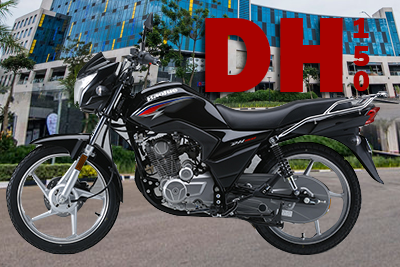
<style>
.page{position:relative;width:400px;height:267px}
.page>*{position:absolute;margin:0}
.t1{font:110.5px "FranklinGothic-Heavy";color:#a70200}
.t2{font:30px "FranklinGothic-Heavy";color:#a70200}
</style>
<div class="page">
<p class="t1" style="left:205px;top:18px;width:138px;height:74px">DH</p>
<p class="t2" style="left:353px;top:18px;width:16px;height:20px">1</p>
<p class="t2" style="left:353px;top:46px;width:17px;height:20px">5</p>
<p class="t2" style="left:353px;top:71px;width:17px;height:20px">0</p>
</div>
